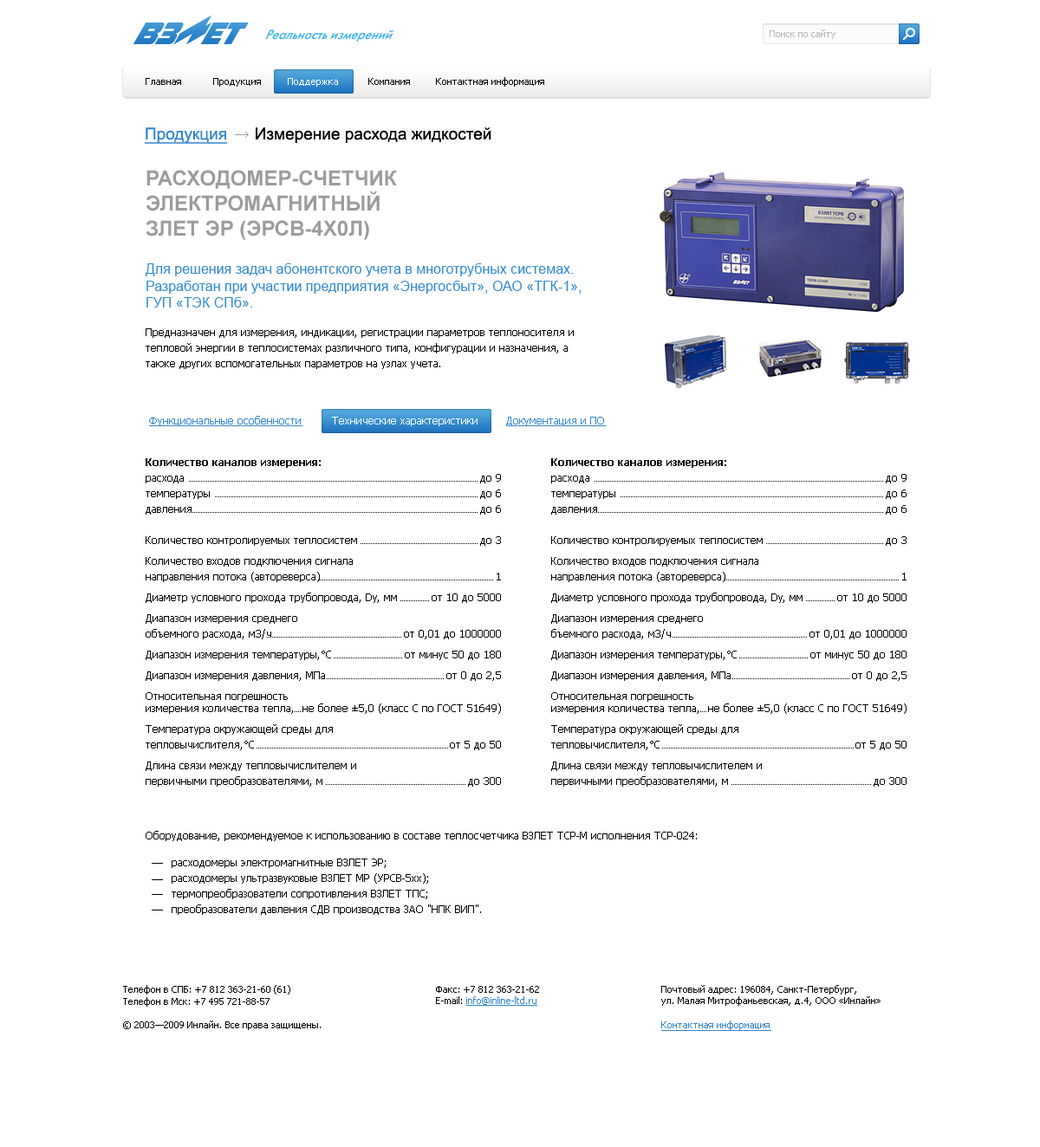
<style>
.page{position:relative;width:1040px;height:1147px;background:#ffffff}
.page>*{position:absolute;margin:0}
.t1{font:13.8px "FuturisC-Italic";color:#3cb3e8;scale:0.94 1}
.t2{font:9.5px "Tahoma";color:#b7b6b6}
.t3{font:9.5px "Tahoma";color:#000000}
.t4{font:9.5px "Tahoma";color:#ffffff}
.t5{font:16.5px "ArialMT";color:#000000}
.t6{font:16.5px "ArialMT";color:#3287cc;text-decoration:underline}
.t7{font:20.8px "Arial-BoldMT";color:#9c9c9c;text-transform:uppercase}
.t8{font:13.9px "ArialMT";color:#378dcf}
.t9{font:10.4px/15.6px "Tahoma";color:#000000}
.t10{font:10.4px "Tahoma";color:#3287cc;text-decoration:underline}
.t11{font:10.4px "Tahoma";color:#ffffff}
.t12{font:10.4px/20.8px "Tahoma";color:#000000}
.t13{font:10.4px/15.6px "Tahoma-Bold";color:#000000}
.t14{font:10.4px "Tahoma";color:#000000}
.t15{font:10.4px/17.3px "Tahoma";color:#000000}
.t16{font:13px "Arial-BoldMT";color:#000000}
.t17{font:9.5px "Tahoma";color:#3287cc;text-decoration:underline}
</style>
<div class="page">
<p class="t1" style="left:265px;top:29px;width:129px;height:13px">Реальность измерений</p>
<p class="t2" style="left:769px;top:29px;width:66px;height:10px">Поиск по сайту</p>
<p class="t3" style="left:146px;top:78px;width:35px;height:7px">Главная</p>
<p class="t3" style="left:213px;top:78px;width:48px;height:9px">Продукция</p>
<p class="t4" style="left:288px;top:78px;width:50px;height:9px">Поддержка</p>
<p class="t3" style="left:368px;top:78px;width:42px;height:7px">Компания</p>
<p class="t3" style="left:436px;top:77px;width:108px;height:10px">Контактная информация</p>
<p class="t5" style="left:145px;top:127px;width:346px;height:17px"><span class="t6">Продукция</span>      Измерение расхода жидкостей</p>
<p class="t7" style="left:146px;top:170px;width:251px;height:70px">Расходомер-счетчик<br>электромагнитный <br>злет ЭР (ЭРСВ-4х0Л)</p>
<p class="t8" style="left:145px;top:263px;width:436px;height:45px">Для решения задач абонентского учета в многотрубных системах. Разработан при участии предприятия «Энергосбыт», ОАО «ТГК-1», ГУП «ТЭК СПб».</p>
<p class="t9" style="left:146px;top:328px;width:428px;height:41px">Предназначен для измерения, индикации, регистрации параметров теплоносителя и тепловой энергии в теплосистемах различного типа, конфигурации и назначения, а также других вспомогательных параметров на узлах учета.</p>
<p class="t10" style="left:149px;top:416px;width:153px;height:10px">Функциональные особенности</p>
<p class="t11" style="left:332px;top:417px;width:145px;height:9px">Технические характеристики</p>
<p class="t10" style="left:506px;top:417px;width:100px;height:9px">Документация и ПО</p>
<p class="t12" style="left:146px;top:458px;width:251px;height:329px"><span class="t13">Количество каналов измерения:<br></span><span class="t9">расхода <br>температуры<br>давления<br><br>Количество контролируемых теплосистем<br></span>Количество входов подключения сигнала<br><span class="t9">направления потока (автореверса)<br></span>Диаметр условного прохода трубопровода, Dy, мм<br>Диапазон измерения среднего <br><span class="t9">объемного расхода, м3/ч<br></span>Диапазон измерения температуры,°С <br>Диапазон измерения давления, МПа<br>Относительная погрешность <br><span class="t14">измерения количества тепла,<br></span>Температура окружающей среды для <span class="t9">тепловычислителя,°С<br></span>Длина связи между тепловычислителем и <span class="t9">первичными преобразователями, м</span></p>
<p class="t12" style="left:551px;top:458px;width:251px;height:329px"><span class="t13">Количество каналов измерения:<br></span><span class="t9">расхода <br>температуры<br>давления<br><br>Количество контролируемых теплосистем<br></span>Количество входов подключения сигнала<br><span class="t9">направления потока (автореверса)<br></span>Диаметр условного прохода трубопровода, Dy, мм<br>Диапазон измерения среднего <br><span class="t9">бъемного расхода, м3/ч<br></span>Диапазон измерения температуры,°С <br>Диапазон измерения давления, МПа<br>Относительная погрешность <br><span class="t14">измерения количества тепла,<br></span>Температура окружающей среды для <span class="t9">тепловычислителя,°С<br></span>Длина связи между тепловычислителем и <span class="t9">первичными преобразователями, м</span></p>
<p class="t12" style="left:302px;top:474px;width:199px;height:313px;text-align:right"><span class="t13"><br></span><span class="t9">до 9<br>до 6<br>до 6<br><br>до 3<br><br></span>1<br>от 10 до 5000<br><br>от 0,01 до 1000000<br>от минус 50 до 180<br>от 0 до 2,5<br><br><span class="t15">не более ±5,0 (класс С по ГОСТ 51649)<br><br></span><span class="t9">от 5 до 50<br> <br></span>до 300</p>
<p class="t12" style="left:708px;top:474px;width:198px;height:313px;text-align:right"><span class="t13"><br></span><span class="t9">до 9<br>до 6<br>до 6<br><br>до 3<br><br></span>1<br>от 10 до 5000<br><br>от 0,01 до 1000000<br>от минус 50 до 180<br>от 0 до 2,5<br><br><span class="t15">не более ±5,0 (класс С по ГОСТ 51649)<br><br></span><span class="t9">от 5 до 50<br> <br></span>до 300</p>
<p class="t14" style="left:146px;top:831px;width:551px;height:10px">Оборудование, рекомендуемое к использованию в составе теплосчетчика ВЗЛЕТ ТСР-М исполнения ТСР-024:</p>
<p class="t9" style="left:172px;top:859px;width:309px;height:56px">расходомеры электромагнитные ВЗЛЕТ ЭР;<br>расходомеры ультразвуковые ВЗЛЕТ МР (УРСВ-5хх);<br>термопреобразователи сопротивления ВЗЛЕТ ТПС;<br>преобразователи давления СДВ производства ЗАО "НПК ВИП".</p>
<p class="t3" style="left:123px;top:985px;width:167px;height:22px">Телефон в СПБ: +7 812 363-21-60 (61)<br>Телефон в Мск: +7 495 721-88-57</p>
<p class="t3" style="left:436px;top:986px;width:103px;height:20px"><span class="t16"><br><br></span>Факс: +7 812 363-21-62<br>E-mail: <span class="t17">info@inline-ltd.ru</span></p>
<p class="t3" style="left:661px;top:985px;width:219px;height:21px"><span class="t16"><br><br></span>Почтовый адрес: 196084, Санкт-Петербург,<br>ул. Малая Митрофаньевская, д.4, ООО «Инлайн»</p>
<p class="t3" style="left:123px;top:1021px;width:198px;height:9px">© 2003—2009 Инлайн. Все права защищены.</p>
<p class="t17" style="left:661px;top:1021px;width:110px;height:10px">Контактная информация</p>
</div>
